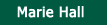
<style>
.page{position:relative;width:107px;height:25px;background:#005941}
.page>*{position:absolute;margin:0}
.t1{font:14px "Tahoma";letter-spacing:0.02em;color:#ffffff;font-weight:bold}
</style>
<div class="page">
<p class="t1" style="left:17px;top:6px;width:67px;height:12px">Marie Hall</p>
</div>
